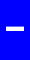
<style>
.page{position:relative;width:30px;height:60px;background:#0000ff}
.page>*{position:absolute;margin:0}
.t1{font:60.7px "KozGoPr6N-Regular";color:#ffffff;scale:1.06 1}
</style>
<div class="page">
<p class="t1" style="left:6px;top:26px;width:18px;height:5px">-</p>
</div>
